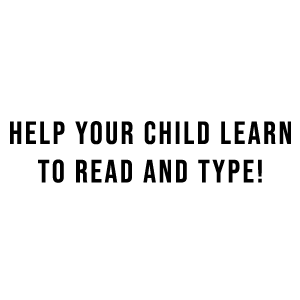
<style>
.page{position:relative;width:300px;height:300px;background:#ffffff}
.page>*{position:absolute;margin:0}
.t1{font:32px "BebasNeue-Regular";letter-spacing:0.08em;color:#000000}
</style>
<div class="page">
<p class="t1" style="left:10px;top:121px;width:281px;height:62px;text-align:center">HELP YOUR CHILD LEARN TO READ AND TYPE!</p>
</div>
